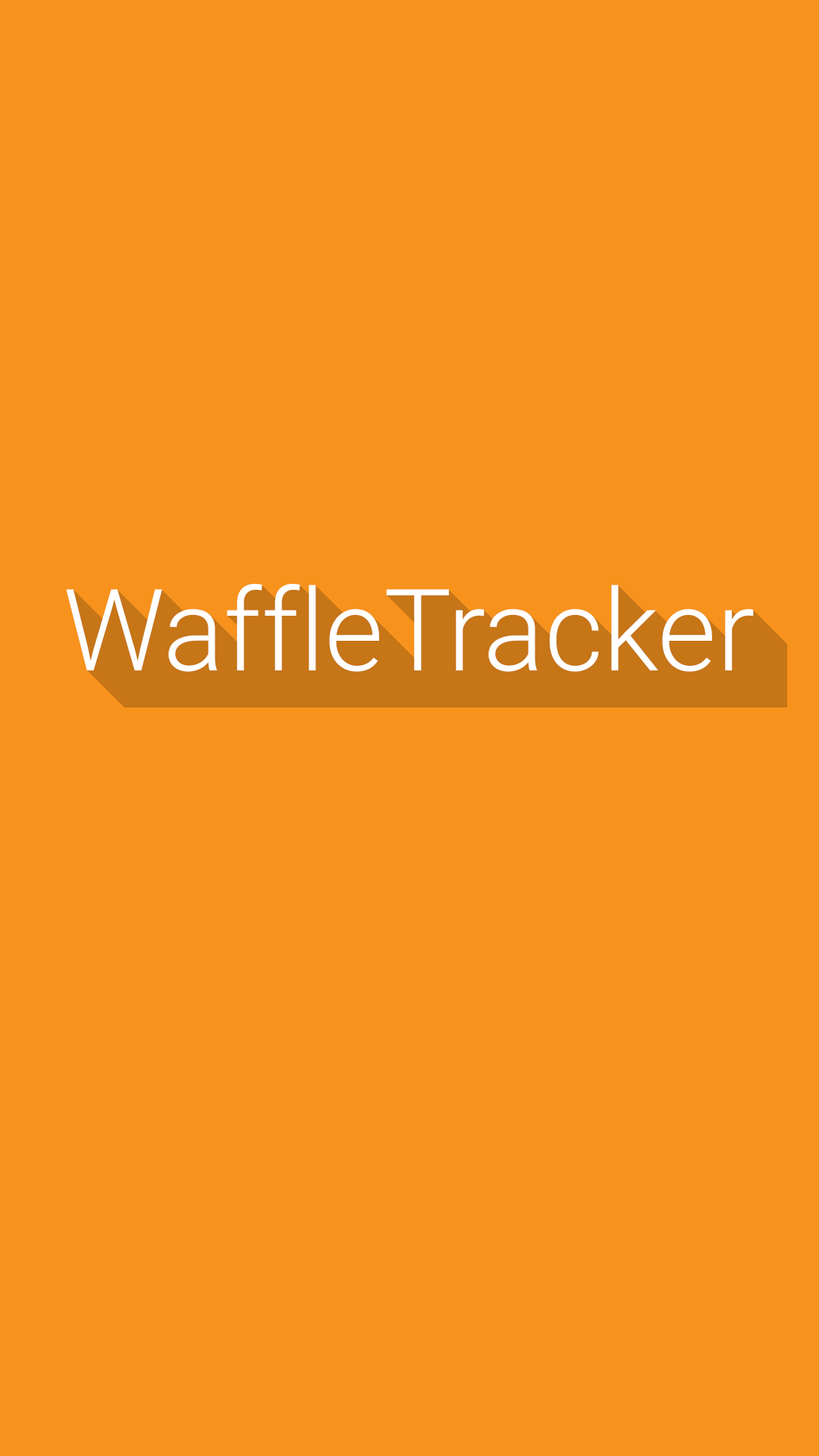
<style>
.page{position:relative;width:819px;height:1456px;background:#f7921d}
.page>*{position:absolute;margin:0}
.t1{font:113.7px "Roboto-Light";color:#ffffff}
</style>
<div class="page">
<p class="t1" style="left:66px;top:583px;width:688px;height:89px">WaffleTracker</p>
</div>
